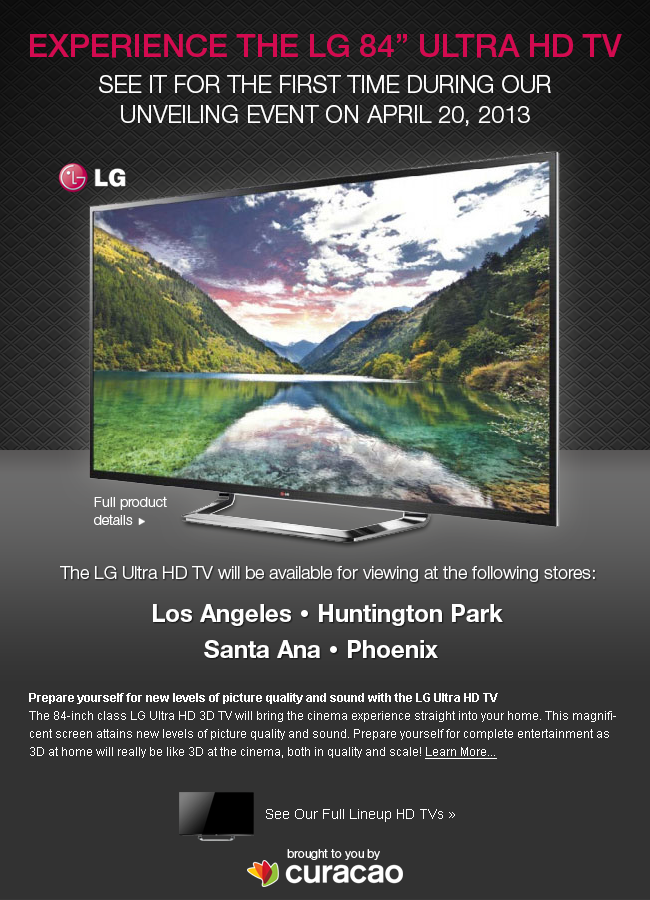
<style>
.page{position:relative;width:650px;height:900px;background:#323232}
.page>*{position:absolute;margin:0}
.t1{font:24px/36px "HelveticaNeue-Light";color:#ffffff}
.t2{font:32px/18px "HelveticaNeue-Medium";color:#d30a50}
.t3{font:24px/30px "HelveticaNeue-Light";color:#ffffff}
.t4{font:14px/18px "HelveticaNeue-Light";color:#ffffff}
.t5{font:18px "HelveticaNeue-Light";color:#ffffff}
.t6{font:24px "HelveticaNeue-Bold";color:#ffffff}
.t7{font:12px/18px "ArialMT";color:#ffffff}
.t8{font:12px/18px "Arial-BoldMT";color:#ffffff}
.t9{font:12px/18px "ArialMT";color:#ffffff;text-decoration:underline}
.t10{font:14px "ArialMT";color:#ffffff}
.t11{font:12px "HelveticaNeue-Light";color:#ffffff}
</style>
<div class="page">
<p class="t1" style="left:30px;top:34px;width:592px;height:93px;text-align:center"><span class="t2">EXPERIENCE THE LG 84” ULTRA HD TV<br></span>SEE IT FOR THE FIRST TIME DURING OUR <br><span class="t3">UNVEILING EVENT ON APRIL 20, 2013</span></p>
<p class="t4" style="left:94px;top:496px;width:73px;height:29px">Full product<br>details</p>
<p class="t5" style="left:60px;top:566px;width:535px;height:16px">The LG Ultra HD TV will be available for viewing at the following stores:</p>
<p class="t6" style="left:153px;top:604px;width:138px;height:22px">Los Angeles</p>
<p class="t6" style="left:319px;top:604px;width:184px;height:22px">Huntington Park</p>
<p class="t6" style="left:204px;top:640px;width:116px;height:18px">Santa Ana</p>
<p class="t6" style="left:348px;top:640px;width:90px;height:18px">Phoenix</p>
<p class="t7" style="left:29px;top:693px;width:587px;height:66px"><span class="t8">Prepare yourself for new levels of picture quality and sound with the LG Ultra HD TV<br></span>The 84-inch class LG Ultra HD 3D TV will bring the cinema experience straight into your home. This magnificent screen attains new levels of picture quality and sound. Prepare yourself for complete entertainment as 3D at home will really be like 3D at the cinema, both in quality and scale! <span class="t9">Learn More...</span></p>
<p class="t10" style="left:266px;top:809px;width:189px;height:13px">See Our Full Lineup HD TVs »</p>
<p class="t11" style="left:287px;top:849px;width:93px;height:11px">brought to you by</p>
</div>
